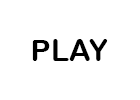
<style>
.page{position:relative;width:140px;height:100px;background:#ffffff}
.page>*{position:absolute;margin:0}
.t1{font:30px "ArialRoundedMTBold";letter-spacing:0.01em;color:#000000}
</style>
<div class="page">
<p class="t1" style="left:32px;top:39px;width:76px;height:22px">PLAY</p>
</div>
